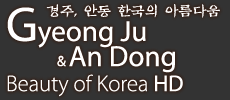
<style>
.page{position:relative;width:230px;height:100px;background:#333333}
.page>*{position:absolute;margin:0}
.t1{font:14px "SMMokPanStd-Regular";color:#ffffff}
.t2{font:22.8px/25px "MyriadPro-Light";color:#ffffff}
.t3{font:49.2px/33.4px "MyriadPro-Regular";color:#ffffff}
.t4{font:29.2px/33.4px "MyriadPro-Regular";color:#ffffff}
.t5{font:14.8px/25px "MyriadPro-Regular";color:#ffffff}
.t6{font:29.2px/25px "MyriadPro-Regular";color:#ffffff}
.t7{font:22.8px/25px "MyriadPro-Regular";color:#ffffff}
</style>
<div class="page">
<p class="t1" style="left:46px;top:4px;width:174px;height:14px">경주, 안동 한국의 아름다움</p>
<p class="t2" style="left:7px;top:7px;width:176px;height:90px"><span class="t3">G</span><span class="t4">yeong Ju<br>         </span><span class="t5">&amp; </span><span class="t6">An Dong<br></span>Beauty of Korea <span class="t7">HD</span></p>
</div>
